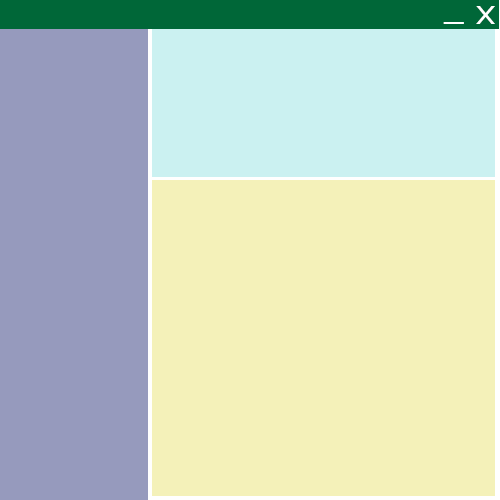
<style>
.page{position:relative;width:500px;height:500px;background:#f4f1b9}
.page>*{position:absolute;margin:0}
.t1{font:24.2px "Tahoma";letter-spacing:-0.05em;color:#ffffff;scale:1.36 1}
.t2{font:24.2px "Tahoma";letter-spacing:-0.05em;color:#ffffff;scale:1.47 1}
</style>
<div class="page">
<p class="t1" style="left:476px;top:6px;width:19px;height:18px">X</p>
<p class="t2" style="left:443px;top:22px;width:21px;height:2px">_</p>
</div>
